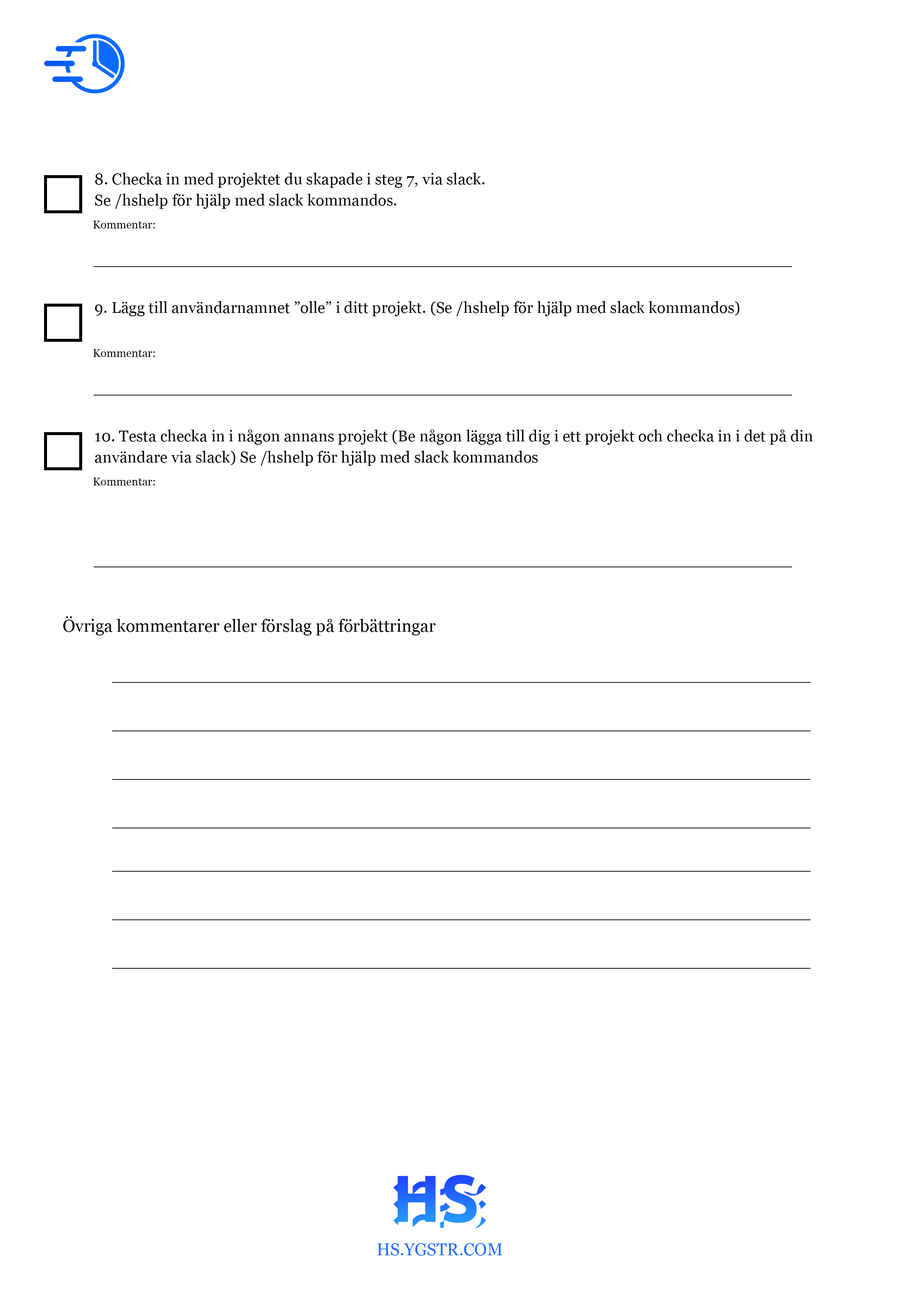
<style>
.page{position:relative;width:918px;height:1299px;background:#ffffff}
.page>*{position:absolute;margin:0}
.t1{font:15.7px/21.4px "Georgia";color:#000000}
.t2{font:11.2px "Georgia";color:#000000}
.t3{font:15.7px "Georgia";color:#000000}
.t4{font:17px "Georgia";color:#000000}
.t5{font:17px "Georgia";color:#216aff}
</style>
<div class="page">
<p class="t1" style="left:95px;top:173px;width:390px;height:36px">8. Checka in med projektet du skapade i steg 7, via slack.<br>Se /hshelp för hjälp med slack kommandos.</p>
<p class="t2" style="left:93px;top:221px;width:62px;height:7px">Kommentar:</p>
<p class="t3" style="left:95px;top:301px;width:645px;height:15px">9. Lägg till användarnamnet ”olle” i ditt projekt. (Se /hshelp för hjälp med slack kommandos)</p>
<p class="t2" style="left:93px;top:349px;width:62px;height:8px">Kommentar:</p>
<p class="t1" style="left:95px;top:429px;width:718px;height:37px">10. Testa checka in i någon annans projekt (Be någon lägga till dig i ett projekt och checka in i det på din användare via slack) Se /hshelp för hjälp med slack kommandos</p>
<p class="t2" style="left:93px;top:478px;width:62px;height:7px">Kommentar:</p>
<p class="t4" style="left:63px;top:616px;width:373px;height:19px">Övriga kommentarer eller förslag på förbättringar</p>
<p class="t5" style="left:377px;top:1243px;width:125px;height:12px">HS.YGSTR.COM</p>
</div>
